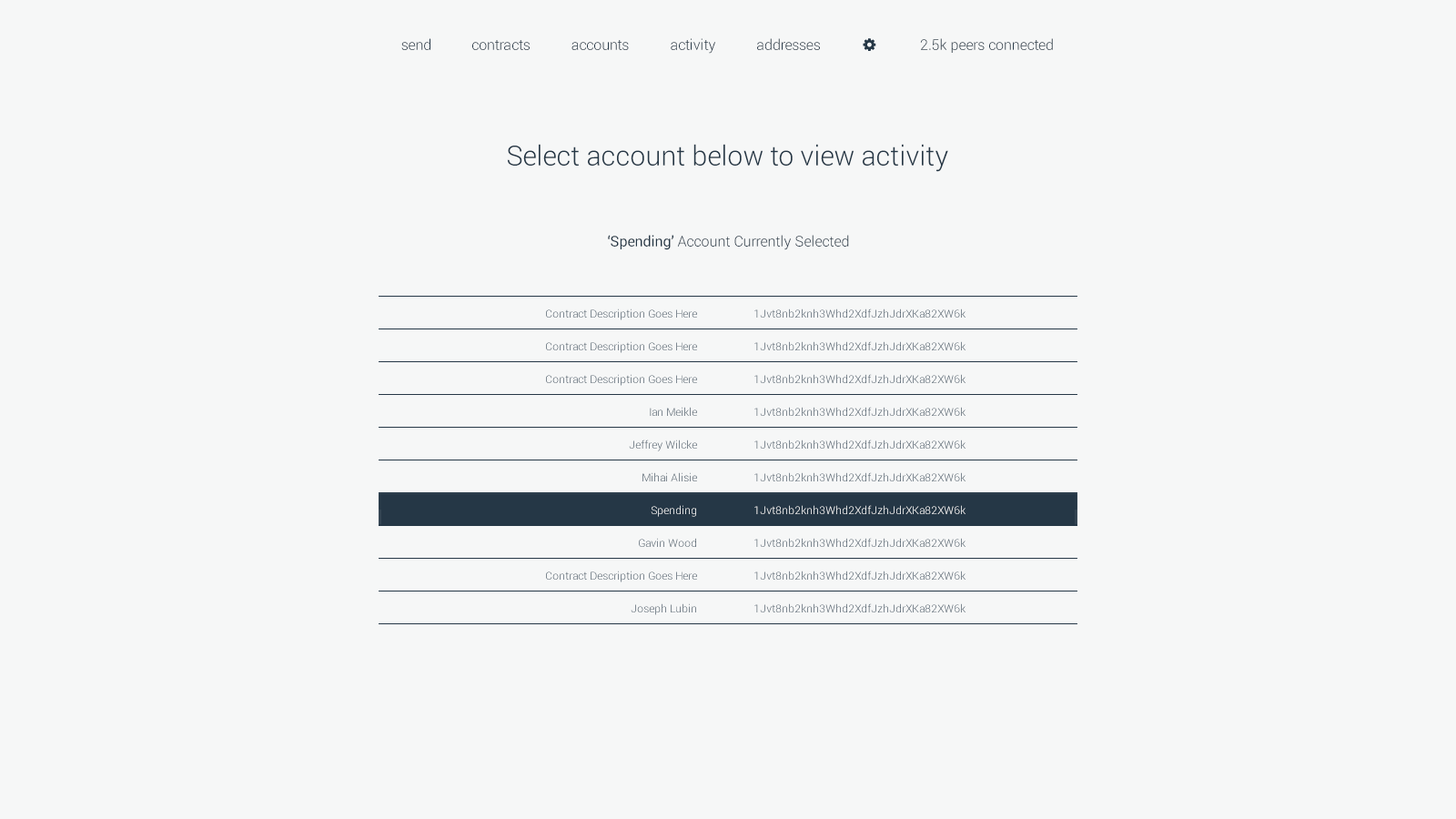
<style>
.page{position:relative;width:1456px;height:819px;background:#f6f7f7}
.page>*{position:absolute;margin:0}
.t1{font:14.6px "Roboto-Light";color:#253746}
.t2{font:27.5px "Roboto-Light";color:#253746}
.t3{font:14.6px "Roboto-Regular";color:#253746}
.t4{font:10.9px "Roboto-Light"}
.t5{font:10.9px "Roboto-Light";color:#ffffff}
</style>
<div class="page">
<p class="t1" style="left:401px;top:38px;width:29px;height:12px">send</p>
<p class="t1" style="left:472px;top:40px;width:58px;height:10px">contracts</p>
<p class="t1" style="left:571px;top:40px;width:58px;height:10px">accounts</p>
<p class="t1" style="left:671px;top:38px;width:44px;height:16px">activity</p>
<p class="t1" style="left:757px;top:38px;width:63px;height:12px">addresses</p>
<p class="t1" style="left:920px;top:38px;width:133px;height:15px">2.5k peers connected</p>
<p class="t2" style="left:507px;top:144px;width:441px;height:28px">Select account below to view activity</p>
<p class="t1" style="left:608px;top:235px;width:241px;height:15px"><span class="t3">‘Spending’ </span>Account Currently Selected</p>
<p class="t4" style="left:546px;top:308px;width:151px;height:12px">Contract Description Goes Here</p>
<p class="t4" style="left:754px;top:308px;width:211px;height:10px">1Jvt8nb2knh3Whd2XdfJzhJdrXKa82XW6k</p>
<p class="t4" style="left:546px;top:341px;width:151px;height:12px">Contract Description Goes Here</p>
<p class="t4" style="left:754px;top:341px;width:211px;height:9px">1Jvt8nb2knh3Whd2XdfJzhJdrXKa82XW6k</p>
<p class="t4" style="left:546px;top:374px;width:151px;height:12px">Contract Description Goes Here</p>
<p class="t4" style="left:754px;top:374px;width:211px;height:9px">1Jvt8nb2knh3Whd2XdfJzhJdrXKa82XW6k</p>
<p class="t4" style="left:650px;top:407px;width:47px;height:9px">Ian Meikle</p>
<p class="t4" style="left:754px;top:407px;width:211px;height:9px">1Jvt8nb2knh3Whd2XdfJzhJdrXKa82XW6k</p>
<p class="t4" style="left:629px;top:440px;width:68px;height:11px">Jeffrey Wilcke</p>
<p class="t4" style="left:754px;top:440px;width:211px;height:9px">1Jvt8nb2knh3Whd2XdfJzhJdrXKa82XW6k</p>
<p class="t4" style="left:642px;top:472px;width:55px;height:9px">Mihai Alisie</p>
<p class="t4" style="left:754px;top:472px;width:211px;height:9px">1Jvt8nb2knh3Whd2XdfJzhJdrXKa82XW6k</p>
<p class="t5" style="left:651px;top:505px;width:45px;height:12px">Spending</p>
<p class="t5" style="left:754px;top:505px;width:211px;height:9px">1Jvt8nb2knh3Whd2XdfJzhJdrXKa82XW6k</p>
<p class="t4" style="left:639px;top:538px;width:57px;height:9px">Gavin Wood</p>
<p class="t4" style="left:754px;top:538px;width:211px;height:9px">1Jvt8nb2knh3Whd2XdfJzhJdrXKa82XW6k</p>
<p class="t4" style="left:546px;top:571px;width:151px;height:11px">Contract Description Goes Here</p>
<p class="t4" style="left:754px;top:571px;width:211px;height:9px">1Jvt8nb2knh3Whd2XdfJzhJdrXKa82XW6k</p>
<p class="t4" style="left:631px;top:603px;width:65px;height:12px">Joseph Lubin</p>
<p class="t4" style="left:754px;top:603px;width:211px;height:9px">1Jvt8nb2knh3Whd2XdfJzhJdrXKa82XW6k</p>
</div>
